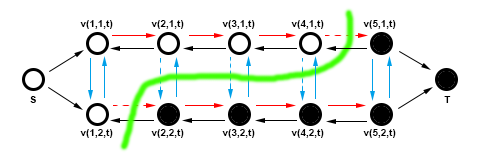
<style>
.page{position:relative;width:485px;height:160px;background:#ffffff}
.page>*{position:absolute;margin:0}
.t1{font:10px "Arial-BoldMT";color:#000000}
</style>
<div class="page">
<p class="t1" style="left:80px;top:20px;width:33px;height:9px">v(1,1,t)</p>
<p class="t1" style="left:151px;top:20px;width:33px;height:9px">v(2,1,t)</p>
<p class="t1" style="left:222px;top:20px;width:33px;height:9px">v(3,1,t)</p>
<p class="t1" style="left:291px;top:20px;width:33px;height:9px">v(4,1,t)</p>
<p class="t1" style="left:363px;top:20px;width:33px;height:9px">v(5,1,t)</p>
<p class="t1" style="left:30px;top:96px;width:6px;height:7px">S</p>
<p class="t1" style="left:444px;top:96px;width:7px;height:7px">T</p>
<p class="t1" style="left:80px;top:129px;width:33px;height:9px">v(1,2,t)</p>
<p class="t1" style="left:151px;top:129px;width:33px;height:9px">v(2,2,t)</p>
<p class="t1" style="left:222px;top:129px;width:33px;height:9px">v(3,2,t)</p>
<p class="t1" style="left:291px;top:129px;width:33px;height:9px">v(4,2,t)</p>
<p class="t1" style="left:363px;top:129px;width:33px;height:9px">v(5,2,t)</p>
</div>
